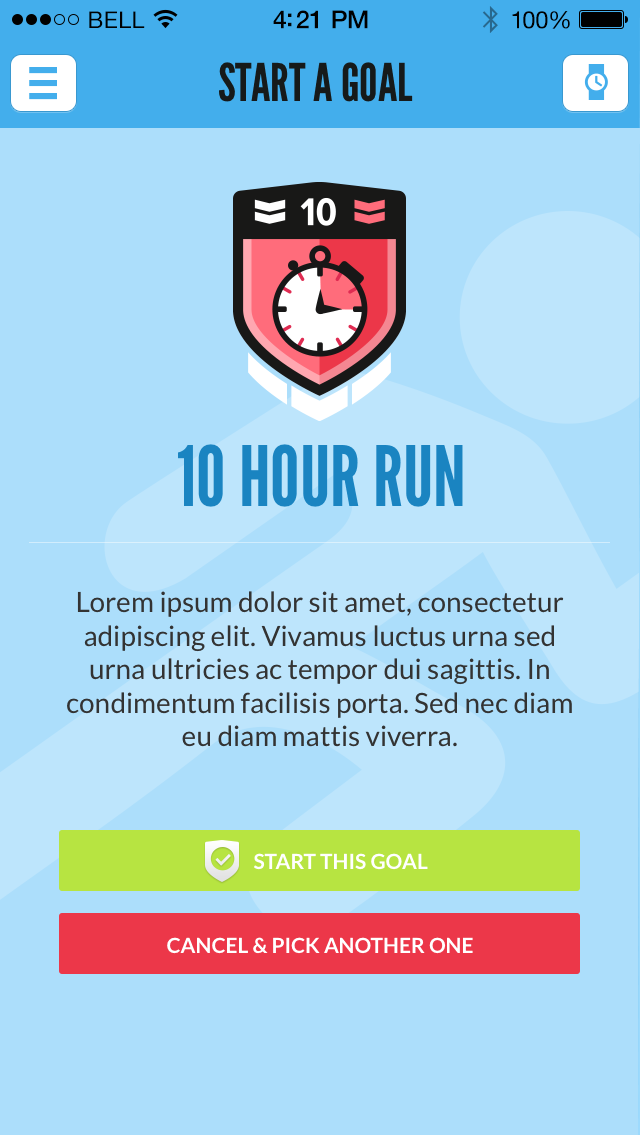
<style>
.page{position:relative;width:640px;height:1135px;background:#acdefb}
.page>*{position:absolute;margin:0}
.t1{font:23px "HelveticaNeue";letter-spacing:0.02em;color:#000000}
.t2{font:25px "HelveticaNeue-Medium";letter-spacing:-0.02em;color:#000000}
.t3{font:24px "HelveticaNeue";letter-spacing:-0.02em;color:#010101}
.t4{font:52px "LeagueGothic";color:#161a1a;text-transform:uppercase}
.t5{font:83px "LeagueGothic";color:#1a84c1;text-transform:uppercase}
.t6{font:28px "Lato-Regular";color:#333333}
.t7{font:21px "Lato-Bold";color:#ffffff}
</style>
<div class="page">
<p class="t1" style="left:89px;top:11px;width:56px;height:17px">BELL</p>
<p class="t2" style="left:273px;top:10px;width:95px;height:19px">4:21 PM</p>
<p class="t3" style="left:512px;top:11px;width:58px;height:18px">100%</p>
<p class="t4" style="left:219px;top:62px;width:194px;height:40px">START A GOAL</p>
<p class="t5" style="left:178px;top:444px;width:285px;height:63px">10 hOUR RUN</p>
<p class="t6" style="left:67px;top:591px;width:505px;height:156px;text-align:center">Lorem ipsum dolor sit amet, consectetur adipiscing elit. Vivamus luctus urna sed urna ultricies ac tempor dui sagittis. In condimentum facilisis porta. Sed nec diam eu diam mattis viverra.</p>
<p class="t7" style="left:254px;top:853px;width:174px;height:17px">START THIS GOAL</p>
<p class="t7" style="left:167px;top:937px;width:306px;height:17px">CANCEL &amp; PICK ANOTHER ONE</p>
</div>
